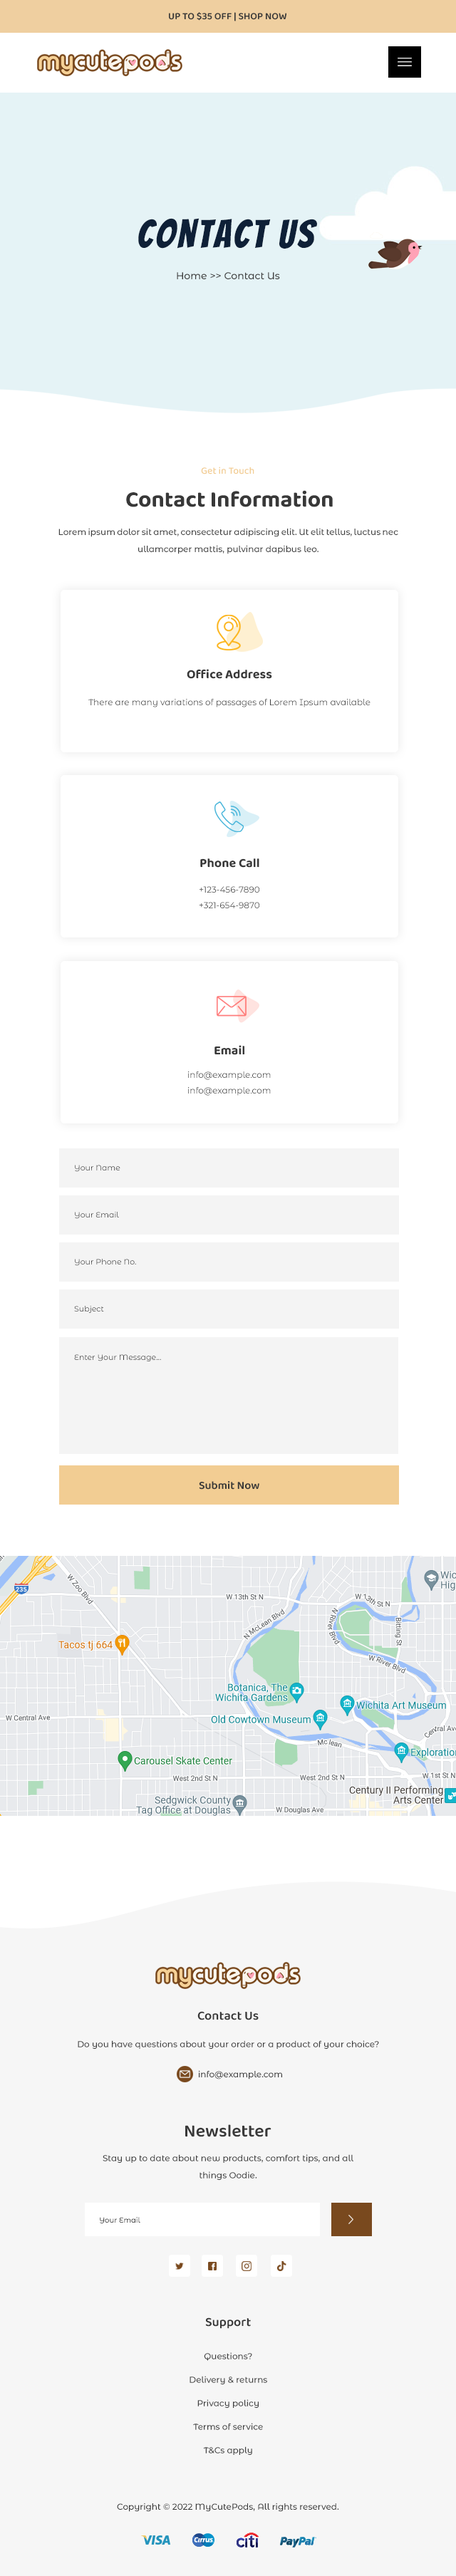
<style>
.page{position:relative;width:456px;height:2576px;background:#ffffff}
.page>*{position:absolute;margin:0}
.t1{font:10px "Baloo2-SemiBold";color:#383838}
.t2{font:39.2px "Bangers-Regular";letter-spacing:0.06em;color:#0e2037}
.t3{font:10px "MontserratAlternates-Medium";color:#3d3d3d}
.t4{font:10px "Baloo2-Medium";color:#f2cd93}
.t5{font:22.8px "Baloo2-Bold";color:#383838}
.t6{font:8.5px/17.1px "MontserratAlternates-Medium";color:#3d3d3d}
.t7{font:12.8px "Baloo2-Bold";color:#383838}
.t8{font:8.5px "MontserratAlternates-Regular";color:#3d3d3d}
.t9{font:8.5px/15.7px "MontserratAlternates-Regular";color:#3d3d3d}
.t10{font:7.8px "MontserratAlternates-Regular";color:#3d3d3d}
.t11{font:7.8px "MontserratAlternates-Regular"}
.t12{font:11.4px "Baloo2-SemiBold";color:#383838}
.t13{font:12.8px "Baloo2-SemiBold";color:#383838}
.t14{font:8.5px "MontserratAlternates-Medium";color:#3d3d3d}
.t15{font:17.8px "Baloo2-SemiBold";color:#383838}
.t16{font:7.1px "MontserratAlternates-Medium";color:#3d3d3d}
.t17{font:8.5px/23.5px "MontserratAlternates-Medium";color:#3d3d3d}
.t18{font:8.5px "MontserratAlternates-Medium";color:#383838}
</style>
<div class="page">
<p class="t1" style="left:169px;top:12px;width:117px;height:9px">UP TO $35 OFF | SHOP NOW</p>
<p class="t2" style="left:138px;top:218px;width:179px;height:31px">Contact Us</p>
<p class="t3" style="left:177px;top:272px;width:103px;height:7px">Home &gt;&gt; Contact Us</p>
<p class="t4" style="left:201px;top:467px;width:53px;height:7px">Get in Touch</p>
<p class="t5" style="left:126px;top:490px;width:207px;height:17px">Contact Information</p>
<p class="t6" style="left:58px;top:528px;width:340px;height:26px;text-align:center">Lorem ipsum dolor sit amet, consectetur adipiscing elit. Ut elit tellus, luctus nec ullamcorper mattis, pulvinar dapibus leo.</p>
<p class="t7" style="left:187px;top:669px;width:85px;height:10px">Office Address</p>
<p class="t8" style="left:88px;top:699px;width:282px;height:8px">There are many variations of passages of Lorem Ipsum available</p>
<p class="t7" style="left:200px;top:858px;width:59px;height:10px">Phone Call</p>
<p class="t9" style="left:199px;top:886px;width:60px;height:22px;text-align:center">+123-456-7890<br>+321-654-9870</p>
<p class="t7" style="left:214px;top:1045px;width:30px;height:10px">Email</p>
<p class="t9" style="left:188px;top:1071px;width:83px;height:25px;text-align:center">info@example.com<br>info@example.com</p>
<p class="t10" style="left:75px;top:1165px;width:45px;height:7px">Your Name</p>
<p class="t10" style="left:75px;top:1212px;width:44px;height:7px">Your Email</p>
<p class="t10" style="left:75px;top:1259px;width:61px;height:7px">Your Phone No.</p>
<p class="t11" style="left:74px;top:1306px;width:30px;height:7px">Subject</p>
<p class="t10" style="left:74px;top:1354px;width:87px;height:7px">Enter Your Message...</p>
<p class="t12" style="left:199px;top:1481px;width:60px;height:9px">Submit Now</p>
<p class="t13" style="left:197px;top:2011px;width:62px;height:9px">Contact Us</p>
<p class="t14" style="left:78px;top:2040px;width:301px;height:9px">Do you have questions about your order or a product of your choice?</p>
<p class="t14" style="left:199px;top:2070px;width:83px;height:9px">info@example.com</p>
<p class="t15" style="left:185px;top:2124px;width:86px;height:13px">Newsletter</p>
<p class="t6" style="left:103px;top:2154px;width:250px;height:26px;text-align:center">Stay up to date about new products, comfort tips, and all things Oodie.</p>
<p class="t16" style="left:100px;top:2217px;width:40px;height:6px">Your Email</p>
<p class="t13" style="left:205px;top:2317px;width:46px;height:12px">Support</p>
<p class="t17" style="left:189px;top:2352px;width:78px;height:103px;text-align:center">Questions?<br>Delivery &amp; returns<br>Privacy policy<br>Terms of service<br>T&amp;Cs apply</p>
<p class="t18" style="left:117px;top:2503px;width:222px;height:9px">Copyright © 2022 MyCutePods, All rights reserved.</p>
</div>
